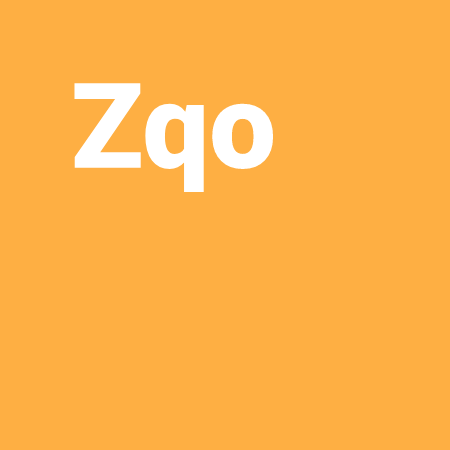
<style>
.page{position:relative;width:450px;height:450px;background:#feaf43}
.page>*{position:absolute;margin:0}
.t1{font:119.2px "Roboto-Black";color:#ffffff}
</style>
<div class="page">
<p class="t1" style="left:74px;top:83px;width:199px;height:109px">Zqo</p>
</div>
